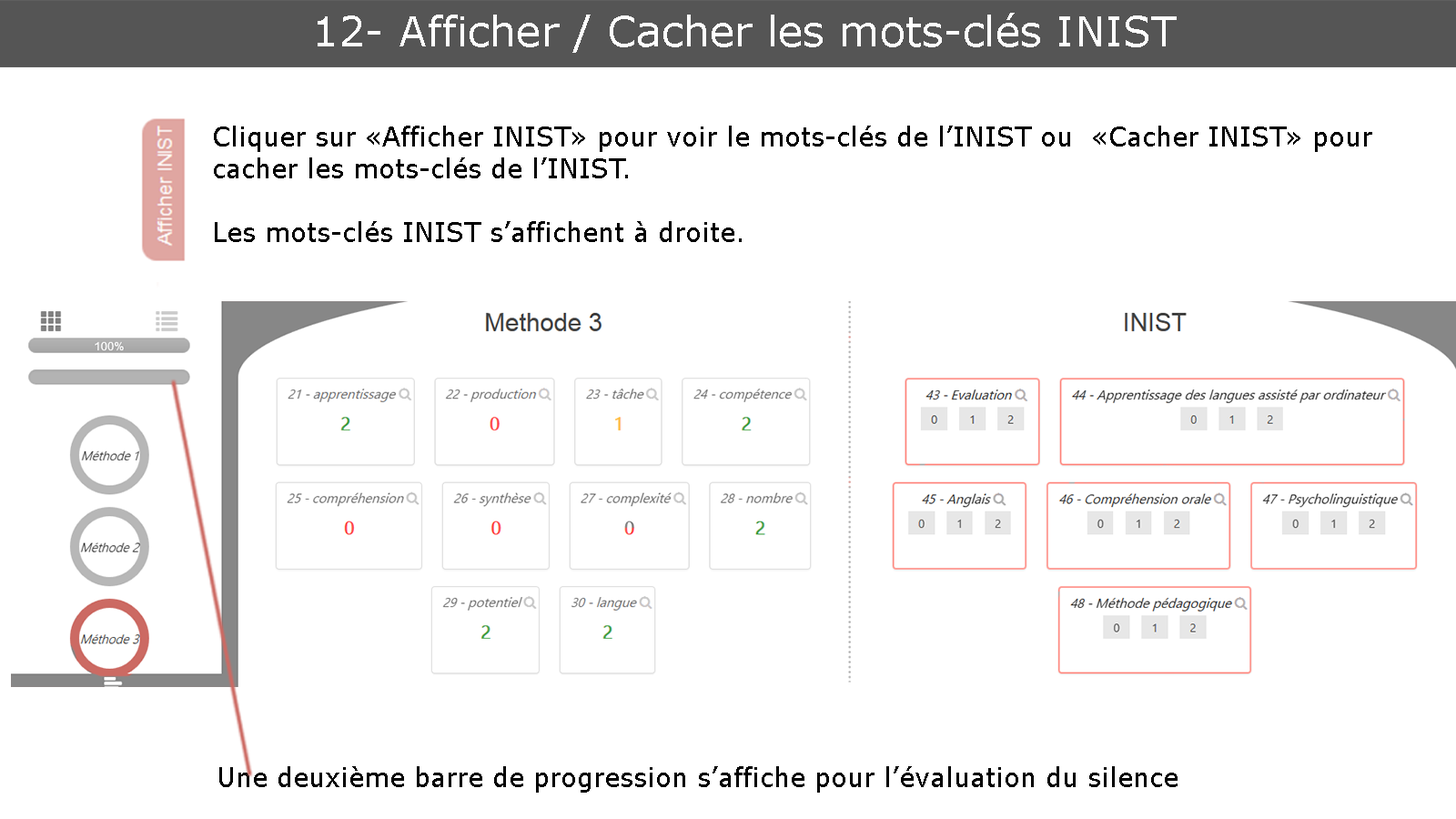
<style>
.page{position:relative;width:1456px;height:819px;background:#ffffff}
.page>*{position:absolute;margin:0}
.t1{font:41.7px "Verdana";color:#ffffff}
.t2{font:26.5px "Verdana";color:#000000}
</style>
<div class="page">
<p class="t1" style="left:318px;top:13px;width:859px;height:40px">12- Afficher / Cacher les mots-clés INIST</p>
<p class="t2" style="left:214px;top:126px;width:1158px;height:52px">Cliquer sur «Afficher INIST» pour voir le mots-clés de l’INIST ou  «Cacher INIST» pour cacher les mots-clés de l’INIST.</p>
<p class="t2" style="left:215px;top:221px;width:527px;height:21px">Les mots-clés INIST s’affichent à droite.</p>
<p class="t2" style="left:219px;top:766px;width:959px;height:27px">Une deuxième barre de progression s’affiche pour l’évaluation du silence</p>
</div>
